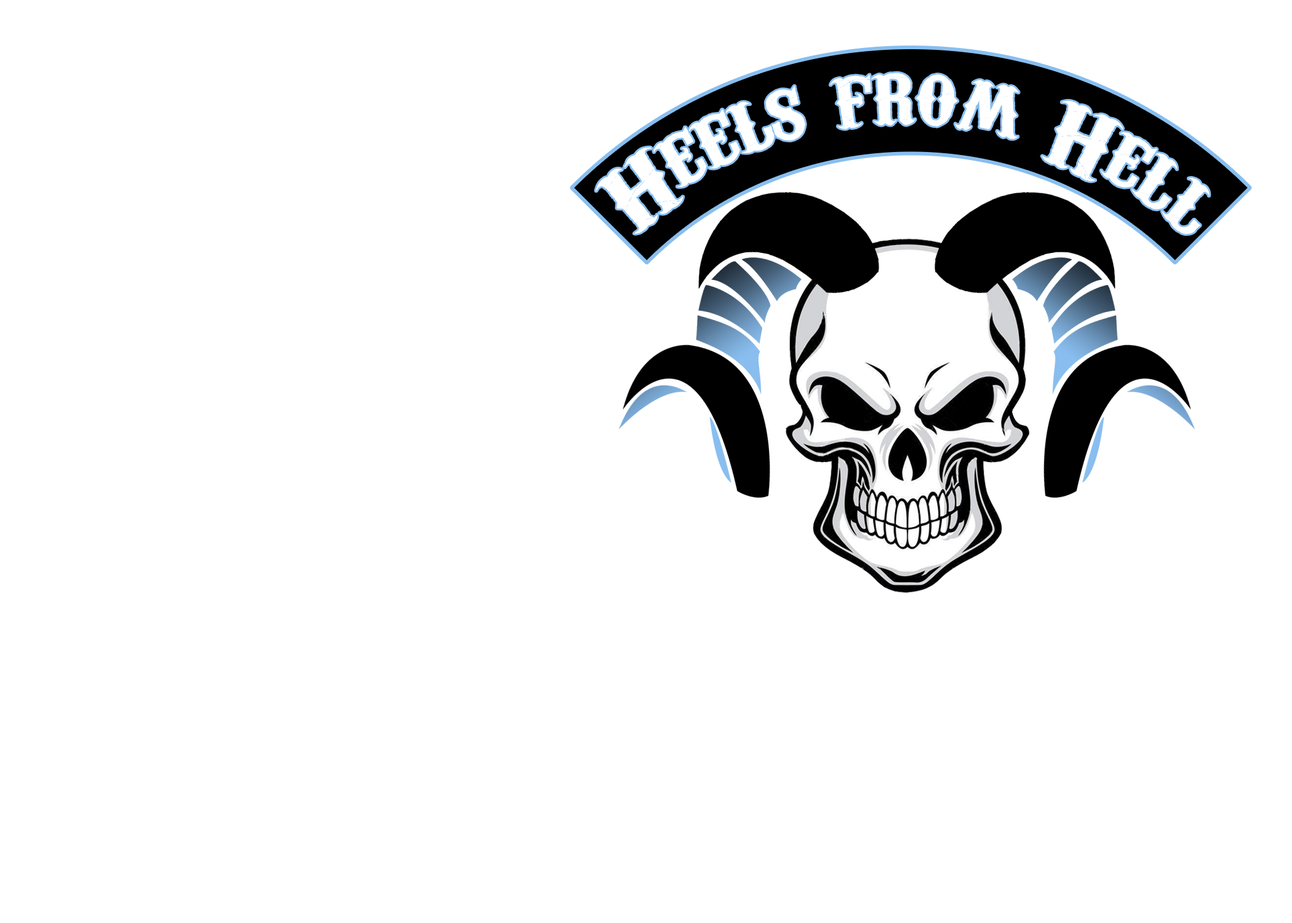
<style>
.page{position:relative;width:1292px;height:923px;background:#ffffff}
.page>*{position:absolute;margin:0}
.t1{font:88.6px "CarnivaleeFreakshow";color:#ffffff}
</style>
<div class="page">
<p class="t1" style="left:596px;top:73px;width:614px;height:161px;rotate:3deg">Heels from Hell<br><br>H</p>
</div>
